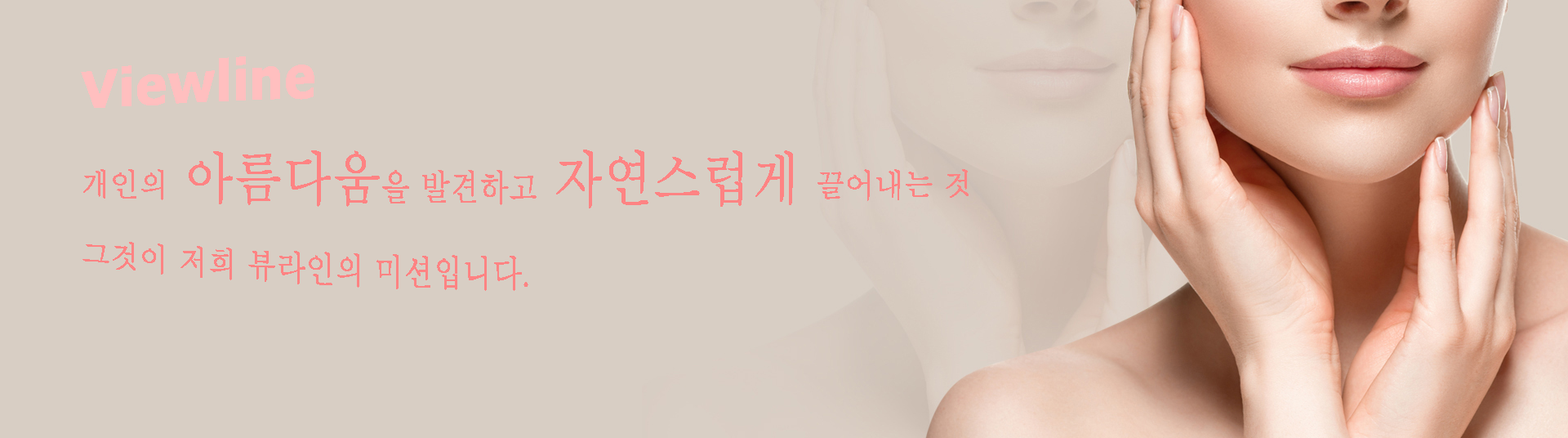
<style>
.page{position:relative;width:1568px;height:438px;background:#d8cec4}
.page>*{position:absolute;margin:0}
.t1{font:29.4px "Batang";color:#ff8383}
.t2{font:49px "Verdana-Bold";color:#ffbfbf}
.t3{font:49px "Batang";color:#ff8383}
</style>
<div class="page">
<p class="t1" style="left:81px;top:56px;width:888px;height:235px"><span class="t2">Viewline<br></span>개인의<span class="t3"> 아름다움</span>을 발견하고<span class="t3"> 자연스럽게 </span>끌어내는 것<br>그것이 저희 뷰라인의 미션입니다.</p>
</div>
